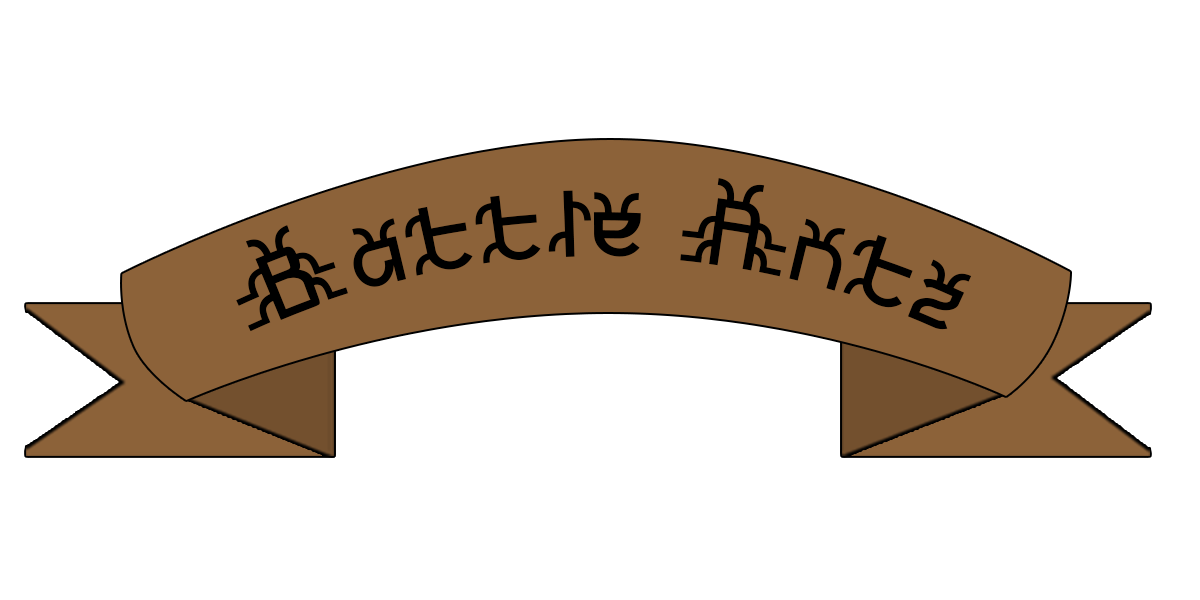
<style>
.page{position:relative;width:1200px;height:600px;background:#ffffff}
.page>*{position:absolute;margin:0}
.t1{font:96px "FuturexBugz";color:#000000}
</style>
<div class="page">
<p class="t1" style="left:236px;top:178px;width:736px;height:154px">Battle Antz</p>
</div>
